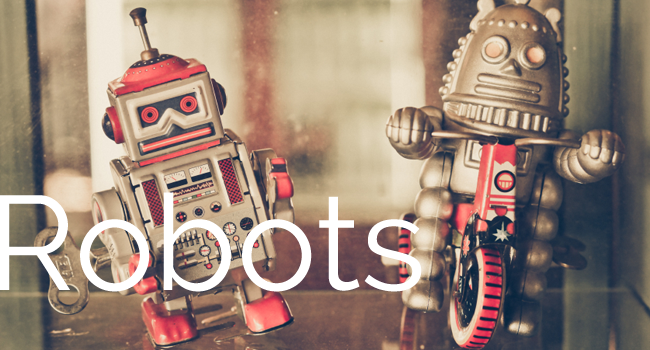
<style>
.page{position:relative;width:650px;height:350px}
.page>*{position:absolute;margin:0}
.t1{font:133.3px "Raleway-Regular";color:#ffffff}
</style>
<div class="page">
<p class="t1" style="left:0px;top:192px;width:422px;height:100px">Robots</p>
</div>
